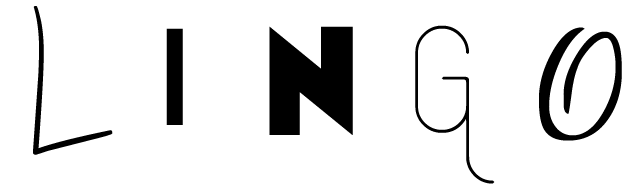
<style>
.page{position:relative;width:635px;height:191px;background:#ffffff}
.page>*{position:absolute;margin:0}
.t1{font:126.2px "DJBCLyleRun";letter-spacing:-0.005em;color:#000000}
.t2{font:180.4px "Telegrafico";letter-spacing:-0.005em;color:#000000}
.t3{font:154.6px "Minotaur-Phatte";letter-spacing:-0.005em;color:#000000}
.t4{font:134px "LemurLightDEMO";letter-spacing:-0.005em;color:#000000}
.t5{font:154.6px "Commercial-Script";letter-spacing:-0.005em;color:#000000}
</style>
<div class="page">
<p class="t1" style="left:33px;top:6px;width:80px;height:149px">L</p>
<p class="t2" style="left:166px;top:28px;width:17px;height:97px">I</p>
<p class="t3" style="left:269px;top:26px;width:84px;height:109px">N</p>
<p class="t4" style="left:415px;top:25px;width:80px;height:159px">G</p>
<p class="t5" style="left:539px;top:27px;width:83px;height:114px">O</p>
</div>
